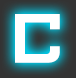
<style>
.page{position:relative;width:76px;height:78px}
.page>*{position:absolute;margin:0}
.t1{font:54.7px "KafuTechnoStd-U";color:#ffffff}
</style>
<div class="page">
<p class="t1" style="left:15px;top:14px;width:45px;height:49px">C</p>
</div>
